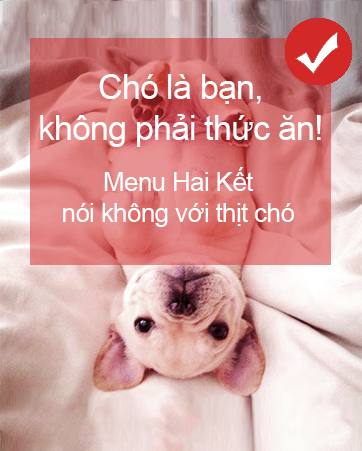
<style>
.page{position:relative;width:362px;height:451px}
.page>*{position:absolute;margin:0}
.t1{font:34px "ArialMT";letter-spacing:-0.025em;color:#ffffff}
.t2{font:26px "ArialMT";letter-spacing:-0.025em;color:#ffffff}
</style>
<div class="page">
<p class="t1" style="left:40px;top:74px;width:281px;height:73px;text-align:center">Chó là bạn,<br>không phải thức ăn!</p>
<p class="t2" style="left:63px;top:167px;width:231px;height:60px;text-align:center">Menu Hai Kết<br>nói không với thịt chó</p>
</div>
